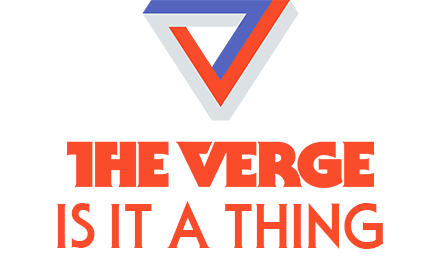
<style>
.page{position:relative;width:440px;height:280px;background:#ffffff}
.page>*{position:absolute;margin:0}
.t1{font:58.3px "SerifGothicBold";color:#fa4b2a}
</style>
<div class="page">
<p class="t1" style="left:57px;top:201px;width:327px;height:48px">IS IT A THING</p>
</div>
